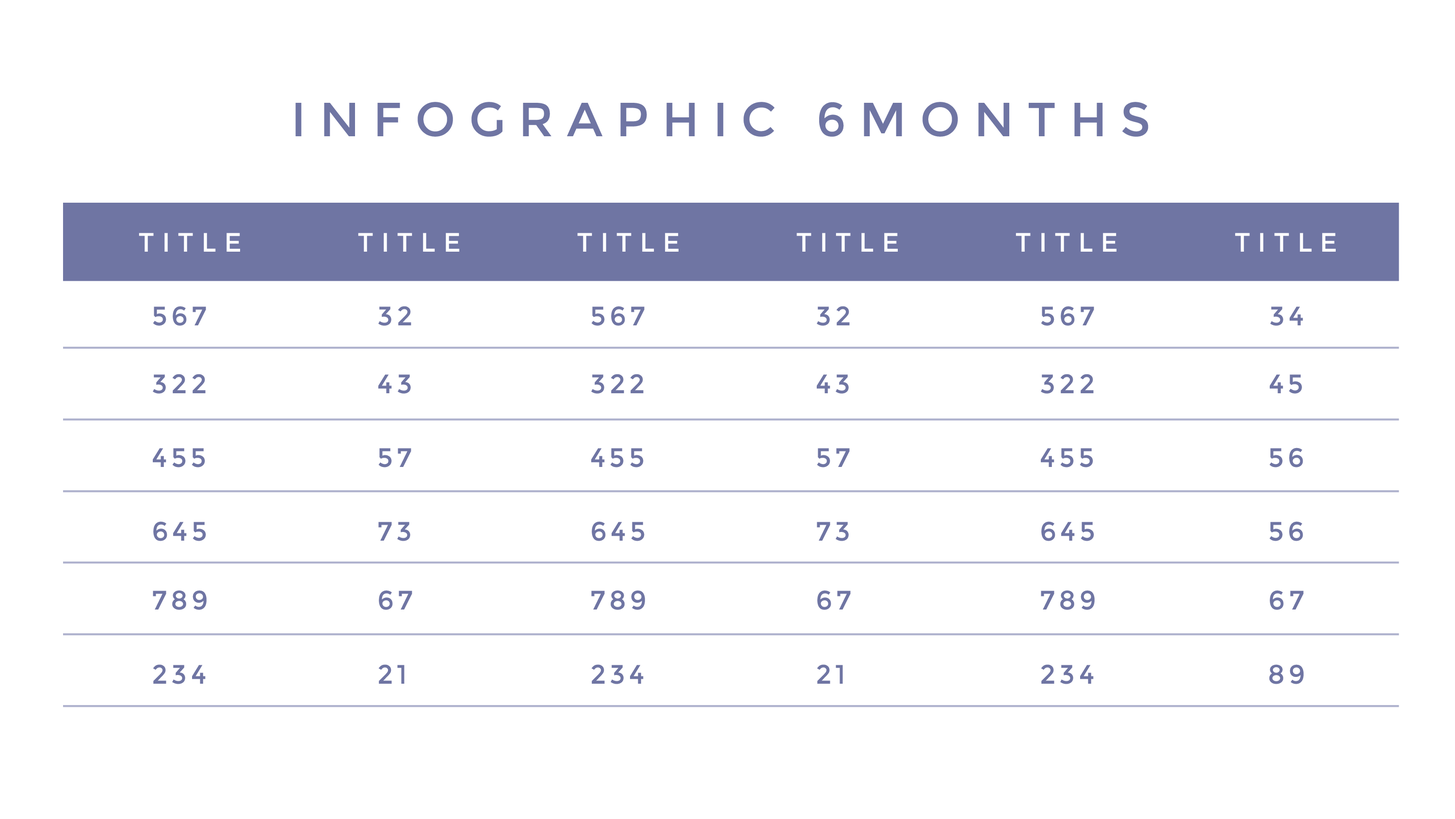
<style>
.page{position:relative;width:1455px;height:819px;background:#ffffff}
.page>*{position:absolute;margin:0}
.t1{font:47.9px "Montserrat-Regular";letter-spacing:0.28em;color:#6f75a3}
.t2{font:26.7px "Montserrat-Regular";letter-spacing:0.28em;color:#ffffff}
.t3{font:26.7px "Montserrat-Regular";letter-spacing:0.15em;color:#6f75a3}
</style>
<div class="page">
<p class="t1" style="left:295px;top:102px;width:854px;height:35px">INFOGRAPHIC 6MONTHS</p>
<p class="t2" style="left:139px;top:233px;width:101px;height:19px">TITLE</p>
<p class="t2" style="left:358px;top:233px;width:101px;height:19px">TITLE</p>
<p class="t2" style="left:577px;top:233px;width:102px;height:19px">TITLE</p>
<p class="t2" style="left:797px;top:233px;width:101px;height:19px">TITLE</p>
<p class="t2" style="left:1016px;top:233px;width:101px;height:19px">TITLE</p>
<p class="t2" style="left:1235px;top:233px;width:101px;height:19px">TITLE</p>
<p class="t3" style="left:153px;top:306px;width:53px;height:20px">567</p>
<p class="t3" style="left:378px;top:306px;width:33px;height:20px">32</p>
<p class="t3" style="left:591px;top:306px;width:54px;height:20px">567</p>
<p class="t3" style="left:817px;top:306px;width:33px;height:20px">32</p>
<p class="t3" style="left:1041px;top:306px;width:53px;height:20px">567</p>
<p class="t3" style="left:1271px;top:307px;width:32px;height:19px">34</p>
<p class="t3" style="left:153px;top:374px;width:53px;height:20px">322</p>
<p class="t3" style="left:378px;top:375px;width:33px;height:19px">43</p>
<p class="t3" style="left:591px;top:374px;width:53px;height:20px">322</p>
<p class="t3" style="left:817px;top:375px;width:32px;height:19px">43</p>
<p class="t3" style="left:1041px;top:374px;width:53px;height:20px">322</p>
<p class="t3" style="left:1270px;top:375px;width:33px;height:19px">45</p>
<p class="t3" style="left:153px;top:448px;width:52px;height:20px">455</p>
<p class="t3" style="left:378px;top:448px;width:33px;height:20px">57</p>
<p class="t3" style="left:591px;top:448px;width:53px;height:20px">455</p>
<p class="t3" style="left:817px;top:448px;width:33px;height:20px">57</p>
<p class="t3" style="left:1041px;top:448px;width:52px;height:20px">455</p>
<p class="t3" style="left:1270px;top:448px;width:33px;height:20px">56</p>
<p class="t3" style="left:153px;top:521px;width:53px;height:20px">645</p>
<p class="t3" style="left:378px;top:522px;width:32px;height:19px">73</p>
<p class="t3" style="left:592px;top:521px;width:53px;height:20px">645</p>
<p class="t3" style="left:817px;top:522px;width:32px;height:19px">73</p>
<p class="t3" style="left:1042px;top:521px;width:52px;height:20px">645</p>
<p class="t3" style="left:1270px;top:521px;width:33px;height:20px">56</p>
<p class="t3" style="left:153px;top:590px;width:54px;height:20px">789</p>
<p class="t3" style="left:379px;top:590px;width:33px;height:20px">67</p>
<p class="t3" style="left:591px;top:590px;width:54px;height:20px">789</p>
<p class="t3" style="left:817px;top:590px;width:34px;height:20px">67</p>
<p class="t3" style="left:1041px;top:590px;width:54px;height:20px">789</p>
<p class="t3" style="left:1270px;top:590px;width:34px;height:20px">67</p>
<p class="t3" style="left:153px;top:665px;width:53px;height:19px">234</p>
<p class="t3" style="left:378px;top:665px;width:27px;height:19px">21</p>
<p class="t3" style="left:591px;top:665px;width:53px;height:19px">234</p>
<p class="t3" style="left:817px;top:665px;width:26px;height:19px">21</p>
<p class="t3" style="left:1041px;top:665px;width:53px;height:19px">234</p>
<p class="t3" style="left:1270px;top:665px;width:34px;height:19px">89</p>
</div>
